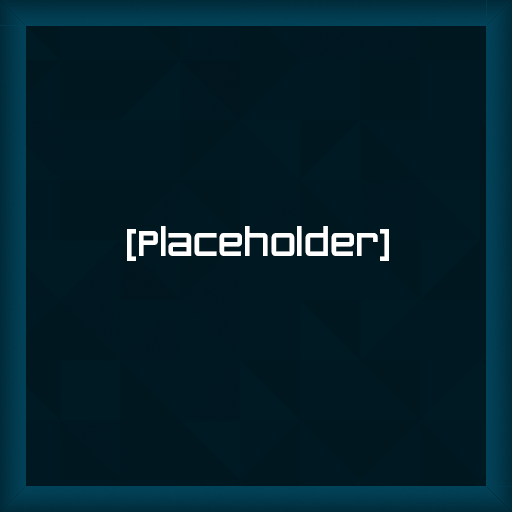
<style>
.page{position:relative;width:512px;height:512px;background:#001822}
.page>*{position:absolute;margin:0}
.t1{font:36px "ZeroesThree-Regular";color:#ffffff}
</style>
<div class="page">
<p class="t1" style="left:127px;top:226px;width:262px;height:35px">[Placeholder]</p>
</div>
